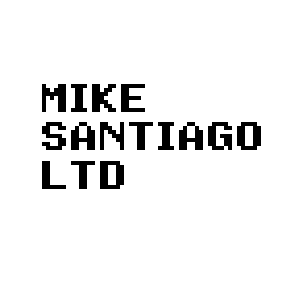
<style>
.page{position:relative;width:300px;height:300px;background:#ffffff}
.page>*{position:absolute;margin:0}
.t1{font:32px "Super-Mario-World";color:#000000}
</style>
<div class="page">
<p class="t1" style="left:42px;top:84px;width:219px;height:105px">MIKE<br>SANTIAGO<br>LTD</p>
</div>
